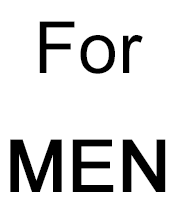
<style>
.page{position:relative;width:176px;height:210px;background:#ffffff}
.page>*{position:absolute;margin:0}
.t1{font:72px/23.5px "ArialMT";color:#000000}
.t2{font:72px/23.5px "ArialMT";color:#000000;font-weight:bold}
</style>
<div class="page">
<p class="t1" style="left:10px;top:21px;width:156px;height:171px;text-align:center">For<br><br><br><br><br><span class="t2">MEN</span></p>
</div>
